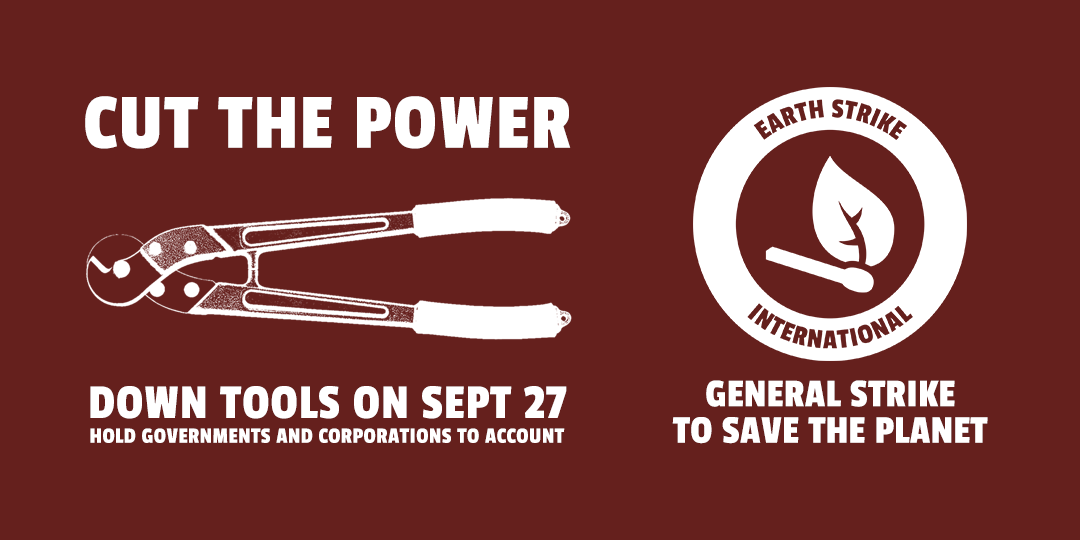
<style>
.page{position:relative;width:1080px;height:540px;background:#65201d}
.page>*{position:absolute;margin:0}
.t1{font:81.9px "PassionOne-Regular";letter-spacing:0.02em;color:#ffffff;text-transform:uppercase}
.t2{font:50.9px "PassionOne-Regular";letter-spacing:0.02em;color:#ffffff;text-transform:uppercase}
.t3{font:41px/36.6px "PassionOne-Regular";letter-spacing:0.01em;color:#ffffff}
.t4{font:22.8px "PassionOne-Regular";letter-spacing:0.02em;color:#ffffff;text-transform:uppercase}
</style>
<div class="page">
<p class="t1" style="left:85px;top:96px;width:486px;height:53px">CUT THE POWER</p>
<p class="t2" style="left:90px;top:386px;width:477px;height:33px">down tools on sept 27</p>
<p class="t3" style="left:672px;top:380px;width:316px;height:64px;text-align:center">GENERAL STRIKE<br>TO SAVE THE PLANET</p>
<p class="t4" style="left:90px;top:428px;width:475px;height:15px">hold governments and corporations to account</p>
</div>
